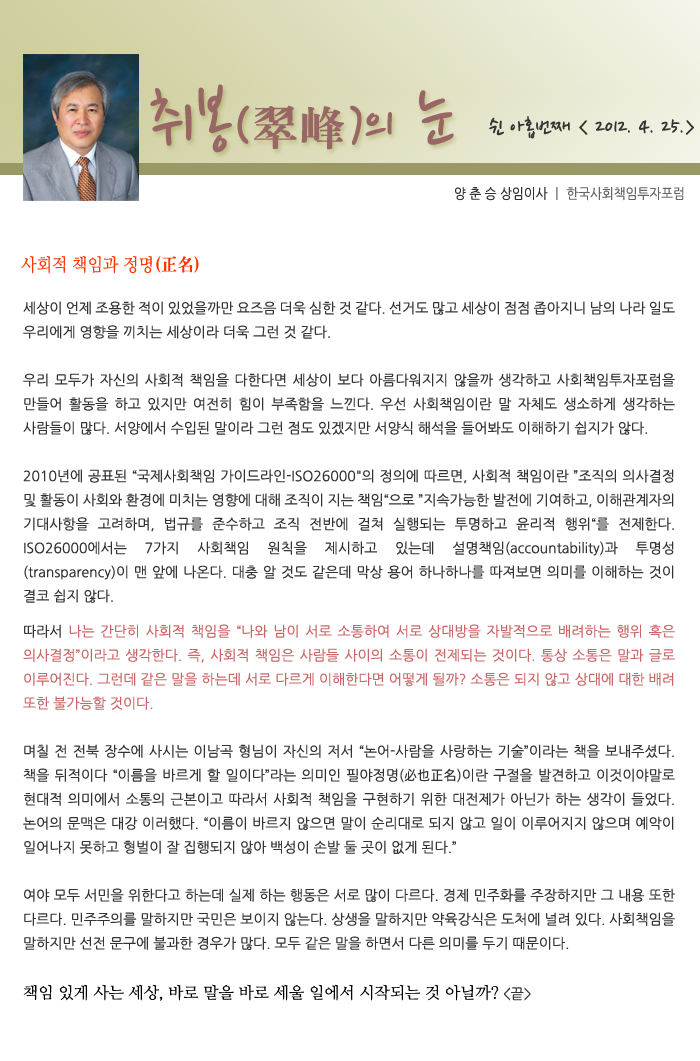
<style>
.page{position:relative;width:700px;height:1061px;background:#ffffff}
.page>*{position:absolute;margin:0}
.t1{font:77.5px "NanumPen";color:#996666}
.t2{font:60px "NanumPen";color:#996666}
.t3{font:48px "H2mjrE";color:#996666}
.t4{font:24px "NanumPen";color:#333333}
.t5{font:14px "NanumGothic";color:#666666;scale:0.9 1}
.t6{font:14px "NanumGothic";color:#333333;scale:0.9 1}
.t7{font:18px "NanumMyeongjo";color:#ff3300;scale:0.9 1}
.t8{font:18px "H2mjrE";color:#ff3300;scale:0.9 1}
.t9{font:14px/24px "NanumGothic";color:#333333}
.t10{font:14px/24px "NanumGothic";color:#cc6666}
.t11{font:16px/24px "NanumMyeongjo";color:#000000}
</style>
<div class="page">
<p class="t1" style="left:150px;top:84px;width:304px;height:69px">취봉<span class="t2">(</span><span class="t3">翠峰</span><span class="t2">)</span><span class="t2">의</span> 눈</p>
<p class="t4" style="left:489px;top:116px;width:205px;height:23px">쉰 아홉번째 &lt; 2012. 4. 25.&gt;</p>
<p class="t5" style="left:455px;top:187px;width:229px;height:14px"><span class="t6">양 춘 승 상임이사 </span>ㅣ 한국사회책임투자포럼</p>
<p class="t7" style="left:21px;top:256px;width:178px;height:18px">사회적 책임과 정명<span class="t8">(正名)</span></p>
<p class="t9" style="left:23px;top:301px;width:652px;height:700px;text-align:justify">세상이 언제 조용한 적이 있었을까만 요즈음 더욱 심한 것 같다. 선거도 많고 세상이 점점 좁아지니 남의 나라 일도 우리에게 영향을 끼치는 세상이라 더욱 그런 것 같다. <br><br>우리 모두가 자신의 사회적 책임을 다한다면 세상이 보다 아름다워지지 않을까 생각하고 사회책임투자포럼을 만들어 활동을 하고 있지만 여전히 힘이 부족함을 느낀다. 우선 사회책임이란 말 자체도 생소하게 생각하는 사람들이 많다. 서양에서 수입된 말이라 그런 점도 있겠지만 서양식 해석을 들어봐도 이해하기 쉽지가 않다.<br><br>2010년에 공표된 “국제사회책임 가이드라인-ISO26000"의 정의에 따르면, 사회적 책임이란 ”조직의 의사결정 및 활동이 사회와 환경에 미치는 영향에 대해 조직이 지는 책임“으로 ”지속가능한 발전에 기여하고, 이해관계자의 기대사항을 고려하며, 법규를 준수하고 조직 전반에 걸쳐 실행되는 투명하고 윤리적 행위“를 전제한다. ISO26000에서는 7가지 사회책임 원칙을 제시하고 있는데 설명책임(accountability)과 투명성(transparency)이 맨 앞에 나온다. 대충 알 것도 같은데 막상 용어 하나하나를 따져보면 의미를 이해하는 것이 결코 쉽지 않다.<br><br>따라서 <span class="t10">나는 간단히 사회적 책임을 “나와 남이 서로 소통하여 서로 상대방을 자발적으로 배려하는 행위 혹은 의사결정”이라고 생각한다. 즉, 사회적 책임은 사람들 사이의 소통이 전제되는 것이다. 통상 소통은 말과 글로 이루어진다. 그런데 같은 말을 하는데 서로 다르게 이해한다면 어떻게 될까? 소통은 되지 않고 상대에 대한 배려 또한 불가능할 것이다.<br></span><br>며칠 전 전북 장수에 사시는 이남곡 형님이 자신의 저서 “논어-사람을 사랑하는 기술”이라는 책을 보내주셨다. 책을 뒤적이다 “이름을 바르게 할 일이다”라는 의미인 필야정명(必也正名)이란 구절을 발견하고 이것이야말로 현대적 의미에서 소통의 근본이고 따라서 사회적 책임을 구현하기 위한 대전제가 아닌가 하는 생각이 들었다. 논어의 문맥은 대강 이러했다. “이름이 바르지 않으면 말이 순리대로 되지 않고 일이 이루어지지 않으며 예악이 일어나지 못하고 형벌이 잘 집행되지 않아 백성이 손발 둘 곳이 없게 된다.”<br><br>여야 모두 서민을 위한다고 하는데 실제 하는 행동은 서로 많이 다르다. 경제 민주화를 주장하지만 그 내용 또한 다르다. 민주주의를 말하지만 국민은 보이지 않는다. 상생을 말하지만 약육강식은 도처에 널려 있다. 사회책임을 말하지만 선전 문구에 불과한 경우가 많다. 모두 같은 말을 하면서 다른 의미를 두기 때문이다.<br><br><span class="t11">책임 있게 사는 세상, 바로 말을 바로 세울 일에서 시작되는 것 아닐까? </span>&lt;끝&gt;</p>
</div>
